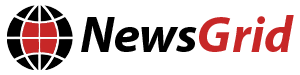
<style>
.page{position:relative;width:300px;height:75px;background:#ffffff}
.page>*{position:absolute;margin:0}
.t1{font:51px "MyriadPro-BoldIt";color:#000000}
.t2{font:51px "MyriadPro-BoldIt";color:#c72727}
</style>
<div class="page">
<p class="t1" style="left:81px;top:15px;width:213px;height:37px">News<span class="t2">Grid</span></p>
</div>
